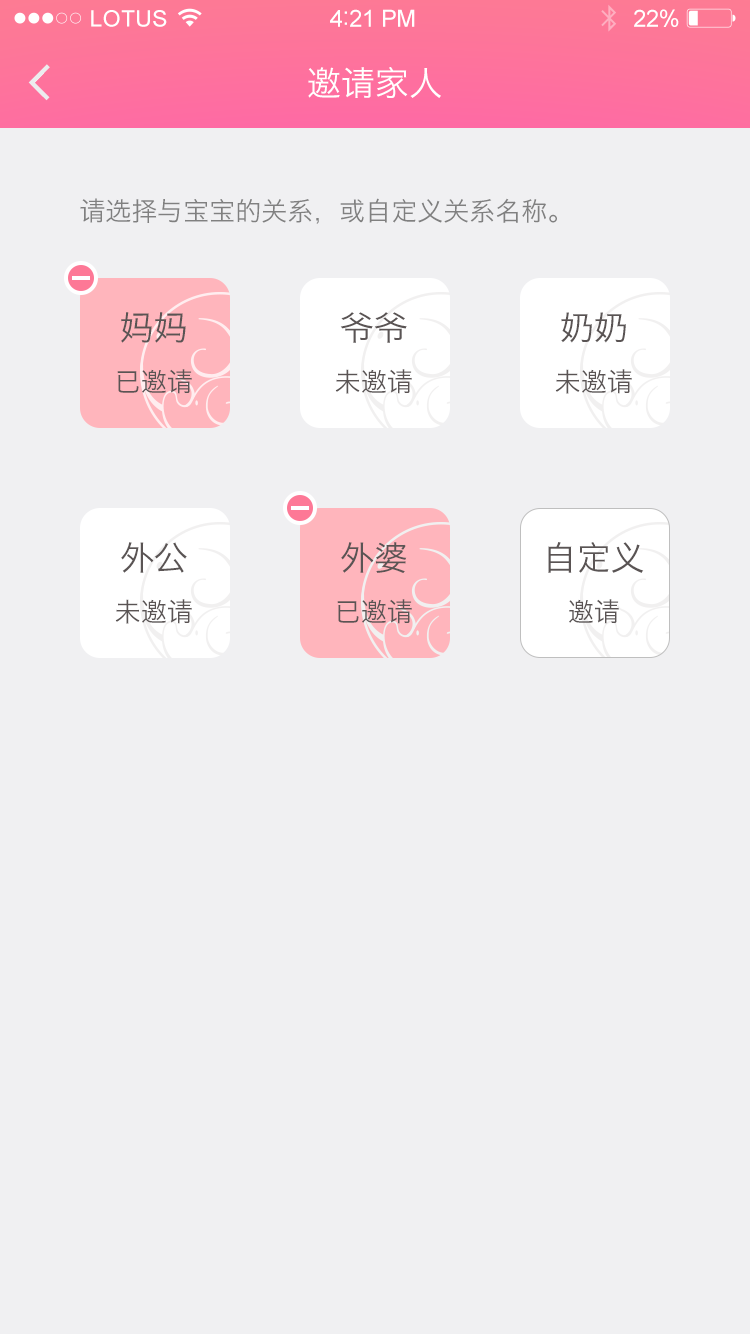
<style>
.page{position:relative;width:750px;height:1334px;background:#f0f0f2}
.page>*{position:absolute;margin:0}
.t1{font:22.6px "ArialMT";letter-spacing:0.02em;color:#ffffff}
.t2{font:23.6px "ArialMT";letter-spacing:-0.02em;color:#ffffff}
.t3{font:25.6px "ArialMT";letter-spacing:-0.02em;color:#ffffff}
.t4{font:34px "HiraginoSansGB-W3";color:#ffffff}
.t5{font:26px "HiraginoSansGB-W3";color:#808080}
.t6{font:26px/51px "HiraginoSansGB-W3";color:#5a5454}
.t7{font:34px/51px "HiraginoSansGB-W3";color:#5a5454}
</style>
<div class="page">
<p class="t1" style="left:91px;top:10px;width:76px;height:17px">LOTUS</p>
<p class="t2" style="left:330px;top:9px;width:85px;height:18px">4<span class="t3">:</span>21 PM</p>
<p class="t2" style="left:634px;top:9px;width:45px;height:18px">22%</p>
<p class="t4" style="left:308px;top:67px;width:133px;height:31px">邀请家人</p>
<p class="t5" style="left:80px;top:198px;width:477px;height:26px">请选择与宝宝的关系，或自定义关系名称。</p>
<p class="t6" style="left:117px;top:312px;width:75px;height:82px;text-align:center"><span class="t7">妈妈<br></span>已邀请</p>
<p class="t6" style="left:335px;top:312px;width:77px;height:82px;text-align:center"><span class="t7">爷爷<br></span>未邀请</p>
<p class="t6" style="left:555px;top:312px;width:77px;height:82px;text-align:center"><span class="t7">奶奶<br></span>未邀请</p>
<p class="t6" style="left:115px;top:542px;width:77px;height:82px;text-align:center"><span class="t7">外公<br></span>未邀请</p>
<p class="t6" style="left:337px;top:542px;width:75px;height:82px;text-align:center"><span class="t7">外婆<br></span>已邀请</p>
<p class="t7" style="left:548px;top:542px;width:96px;height:82px;text-align:center">自定义<br><span class="t6">邀请</span></p>
</div>
